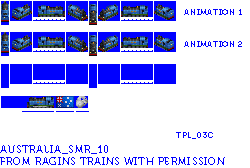
<style>
.page{position:relative;width:250px;height:168px;background:#ffffff}
.page>*{position:absolute;margin:0}
.t1{font:8px "Museo700-Regular";letter-spacing:0.075em;color:#0000ff;text-transform:uppercase}
.t2{font:10px "Museo700-Regular";letter-spacing:0.075em;color:#0000ff;text-transform:uppercase}
</style>
<div class="page">
<p class="t1" style="left:184px;top:9px;width:58px;height:6px">Animation 1</p>
<p class="t1" style="left:184px;top:41px;width:58px;height:6px">Animation 2</p>
<p class="t1" style="left:176px;top:132px;width:37px;height:7px">tpl_03c</p>
<p class="t2" style="left:0px;top:145px;width:225px;height:20px">Australia_SMR_10<br>from ragins trains with permission</p>
</div>
